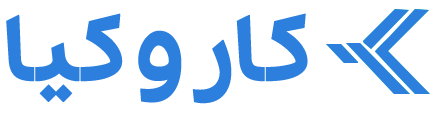
<style>
.page{position:relative;width:434px;height:117px;background:#ffffff}
.page>*{position:absolute;margin:0}
.t1{font:118px "Post-Bold";letter-spacing:-0.02em;color:#2c7fdd;font-weight:bold}
</style>
<div class="page">
<p class="t1" style="left:6px;top:13px;width:302px;height:91px">کار و کیا</p>
</div>
